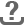
<style>
.page{position:relative;width:24px;height:25px;background:#ffffff}
.page>*{position:absolute;margin:0}
.t1{font:26.5px "HelveticaNeueLTCom-BdCn";color:#666666;scale:1.18 1}
</style>
<div class="page">
<p class="t1" style="left:5px;top:1px;width:14px;height:19px">?</p>
</div>
